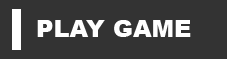
<style>
.page{position:relative;width:227px;height:59px;background:#333333}
.page>*{position:absolute;margin:0}
.t1{font:24px "Arial-Black";color:#ffffff;text-transform:uppercase}
</style>
<div class="page">
<p class="t1" style="left:37px;top:20px;width:154px;height:17px">Play Game</p>
</div>
